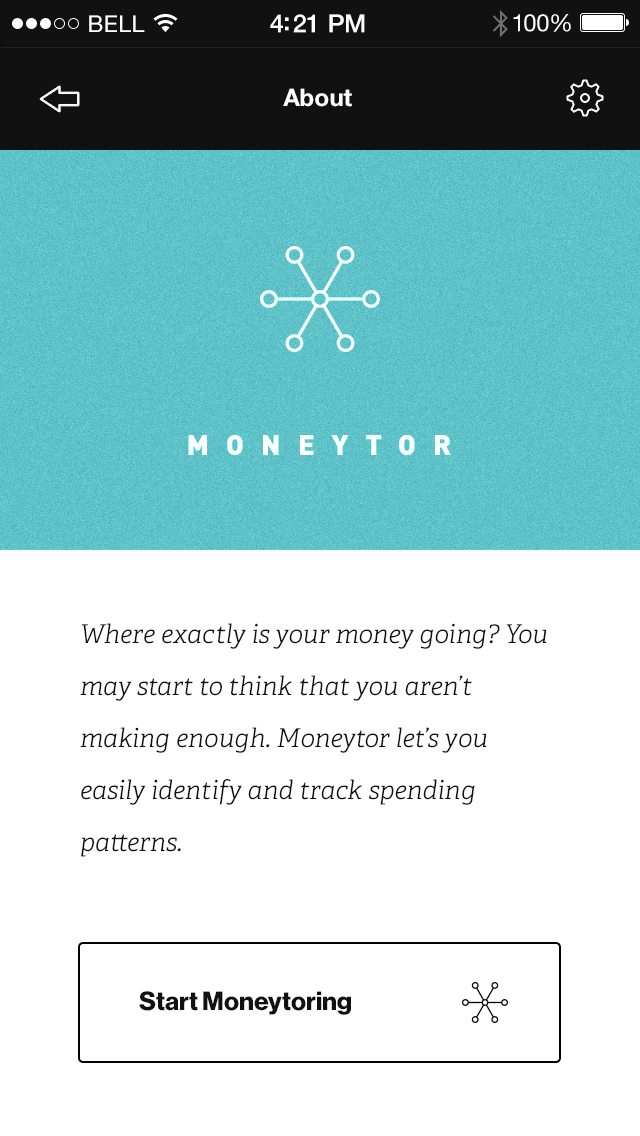
<style>
.page{position:relative;width:640px;height:1136px;background:#ffffff}
.page>*{position:absolute;margin:0}
.t1{font:23px "HelveticaNeue";letter-spacing:0.02em;color:#ffffff}
.t2{font:25px "HelveticaNeue-Medium";letter-spacing:-0.02em;color:#ffffff}
.t3{font:24px "HelveticaNeue";letter-spacing:-0.02em;color:#ffffff}
.t4{font:24px "HelveticaNeue-Bold";color:#ffffff}
.t5{font:28px "Dinbla";letter-spacing:0.6em;color:#ffffff;text-transform:uppercase}
.t6{font:26px/52px "Adelle-LightItalic";color:#111111}
.t7{font:25.9px "HaasGrotDisp-75Bold";color:#111111}
</style>
<div class="page">
<p class="t1" style="left:89px;top:15px;width:56px;height:17px">BELL</p>
<p class="t2" style="left:270px;top:14px;width:95px;height:19px">4:21 PM</p>
<p class="t3" style="left:513px;top:14px;width:58px;height:18px">100%</p>
<p class="t4" style="left:283px;top:88px;width:69px;height:19px">About</p>
<p class="t5" style="left:188px;top:435px;width:263px;height:20px">Moneytor</p>
<p class="t6" style="left:80px;top:623px;width:467px;height:234px">Where exactly is your money going? You may start to think that you aren’t making enough. Moneytor let’s you easily identify and track spending patterns.</p>
<p class="t7" style="left:139px;top:991px;width:212px;height:24px">Start Moneytoring</p>
</div>
